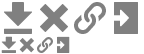
<style>
.page{position:relative;width:144px;height:54px;background:#ffffff}
.page>*{position:absolute;margin:0}
.t1{font:32px "SSStandard";color:#808080}
.t2{font:16px "SSStandard";color:#808080}
</style>
<div class="page">
<p class="t1" style="left:4px;top:2px;width:28px;height:32px">download</p>
<p class="t1" style="left:40px;top:4px;width:28px;height:28px">close</p>
<p class="t1" style="left:74px;top:2px;width:32px;height:32px">link</p>
<p class="t1" style="left:114px;top:2px;width:24px;height:32px">signout</p>
<p class="t2" style="left:1px;top:36px;width:15px;height:17px">download</p>
<p class="t2" style="left:19px;top:38px;width:15px;height:15px">close</p>
<p class="t2" style="left:37px;top:37px;width:16px;height:16px">link</p>
<p class="t2" style="left:57px;top:36px;width:13px;height:17px">signout</p>
</div>
